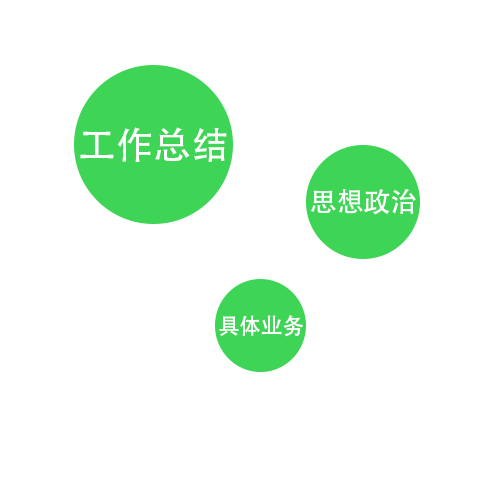
<style>
.page{position:relative;width:500px;height:500px;background:#ffffff}
.page>*{position:absolute;margin:0}
.t1{font:37.5px "MyriadPro-Regular";color:#ffffff}
.t2{font:27px "MyriadPro-Regular";color:#ffffff}
.t3{font:21.9px "MyriadPro-Regular";color:#ffffff}
</style>
<div class="page">
<p class="t1" style="left:80px;top:127px;width:147px;height:35px">工作总结</p>
<p class="t2" style="left:311px;top:189px;width:105px;height:26px">思想政治</p>
<p class="t3" style="left:219px;top:315px;width:84px;height:22px">具体业务</p>
</div>
